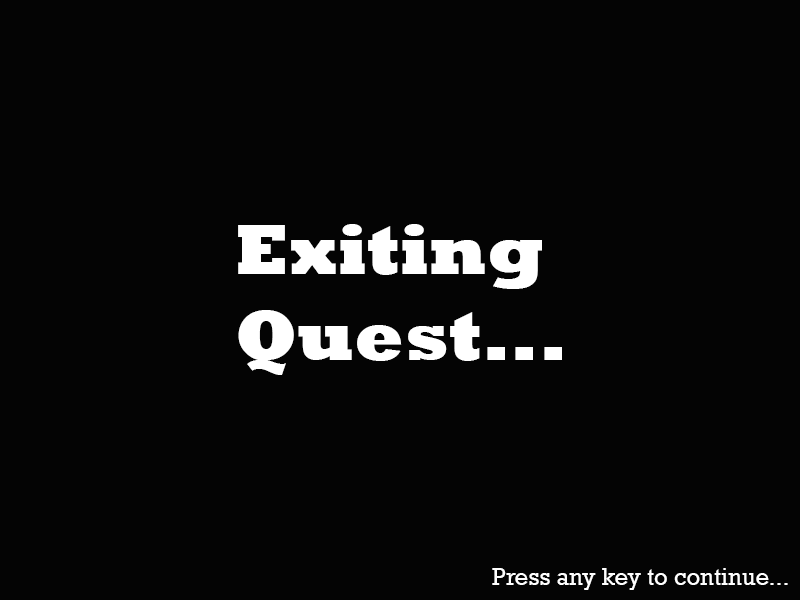
<style>
.page{position:relative;width:800px;height:600px;background:#040404}
.page>*{position:absolute;margin:0}
.t1{font:72px "Rockwell-ExtraBold";color:#ffffff}
.t2{font:24px "Rockwell";color:#ffffff}
</style>
<div class="page">
<p class="t1" style="left:238px;top:224px;width:324px;height:151px">Exiting<br>Quest...</p>
<p class="t2" style="left:492px;top:568px;width:296px;height:22px">Press any key to continue...</p>
</div>
